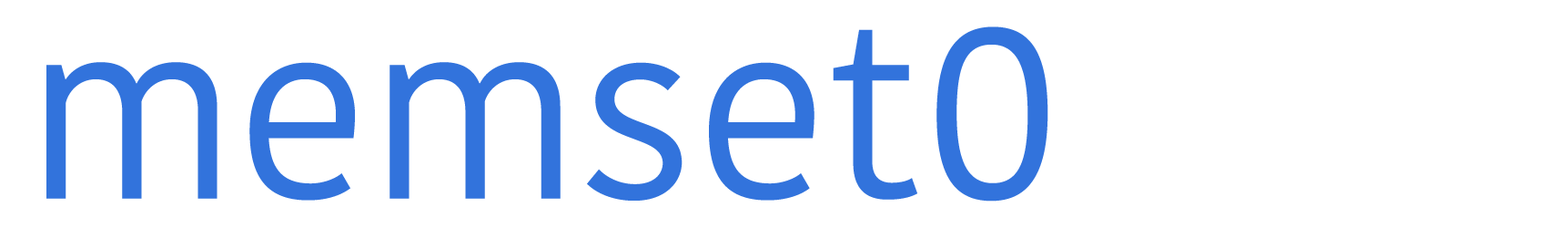
<style>
.page{position:relative;width:1568px;height:228px;background:#ffffff}
.page>*{position:absolute;margin:0}
.t1{font:244.8px "KohinoorBangla-Regular";color:#3273dc}
</style>
<div class="page">
<p class="t1" style="left:46px;top:26px;width:1002px;height:175px">memset0</p>
</div>
